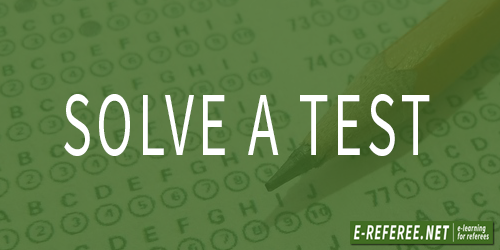
<style>
.page{position:relative;width:500px;height:250px}
.page>*{position:absolute;margin:0}
.t1{font:91px "SourceSansPro-Regular";letter-spacing:0.08em;color:#ffffff;scale:0.62 1}
</style>
<div class="page">
<p class="t1" style="left:64px;top:94px;width:366px;height:62px">SOLVE A TEST</p>
</div>
